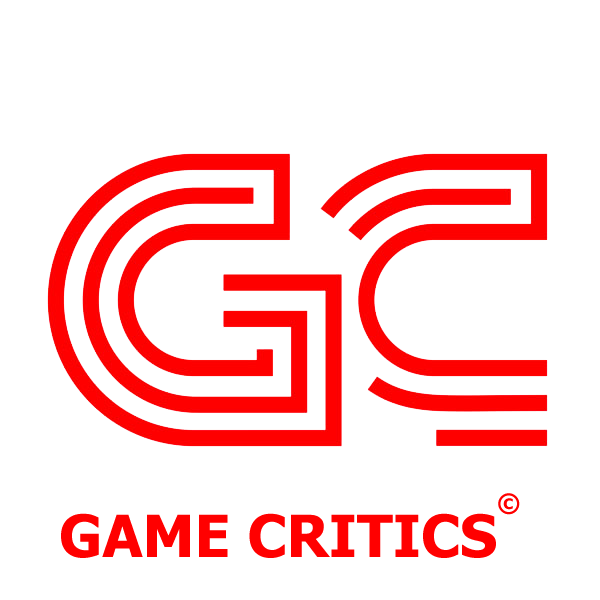
<style>
.page{position:relative;width:600px;height:600px;background:#ffffff}
.page>*{position:absolute;margin:0}
.t1{font:58.3px "Tahoma-Bold";color:#ff0000}
</style>
<div class="page">
<p class="t1" style="left:61px;top:513px;width:435px;height:45px">GAME CRITICS</p>
</div>
